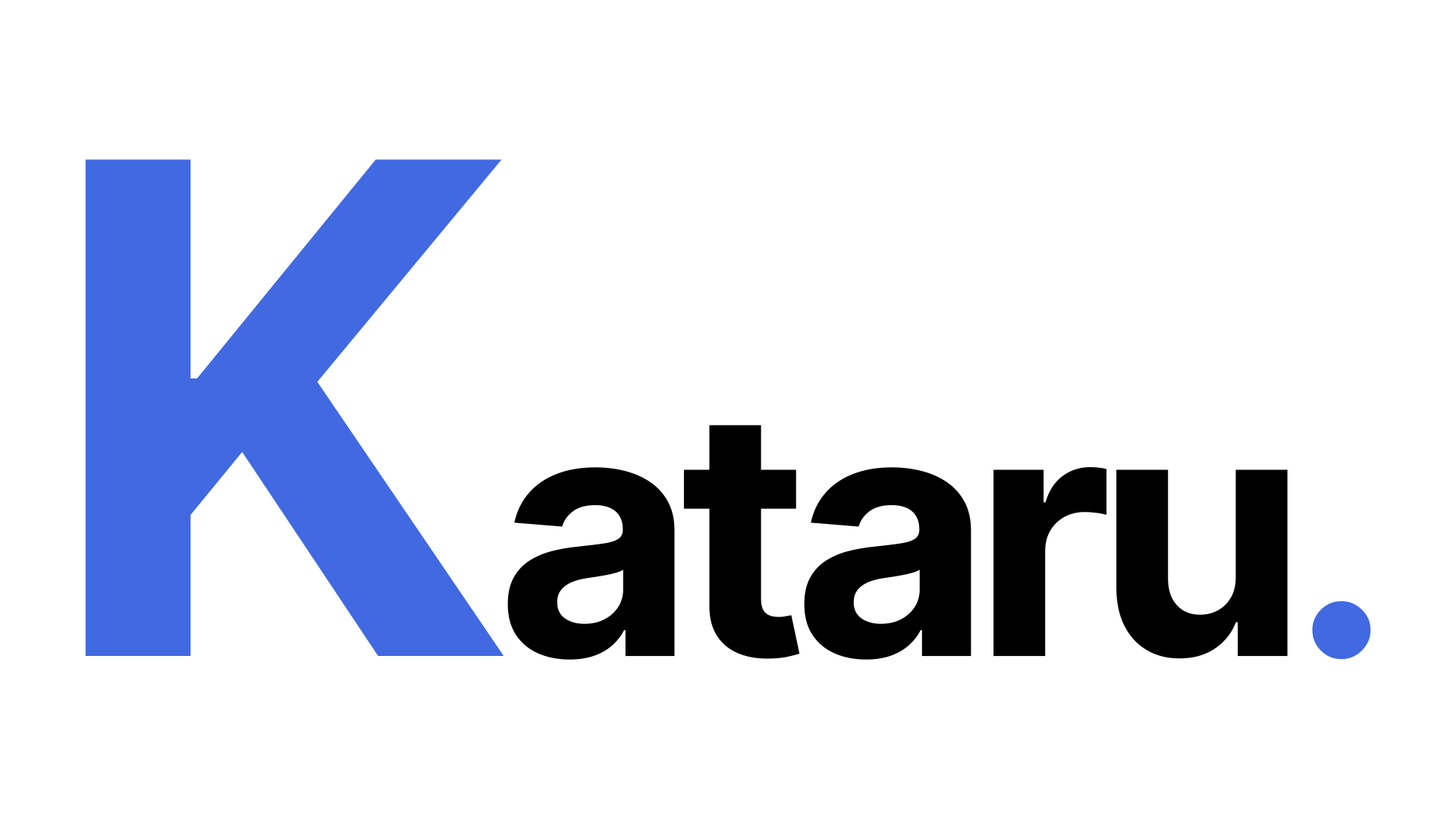
<style>
.page{position:relative;width:1456px;height:819px;background:#ffffff}
.page>*{position:absolute;margin:0}
.t1{font:682.5px "Inter-Bold";color:#4169e1}
.t2{font:341.2px "Inter-Bold";letter-spacing:-0.05em;color:#000000}
.t3{font:341.2px "Inter-Bold";letter-spacing:-0.05em;color:#4169e1}
</style>
<div class="page">
<p class="t1" style="left:85px;top:159px;width:419px;height:497px">K</p>
<p class="t2" style="left:507px;top:425px;width:864px;height:235px">ataru<span class="t3">.</span></p>
</div>
